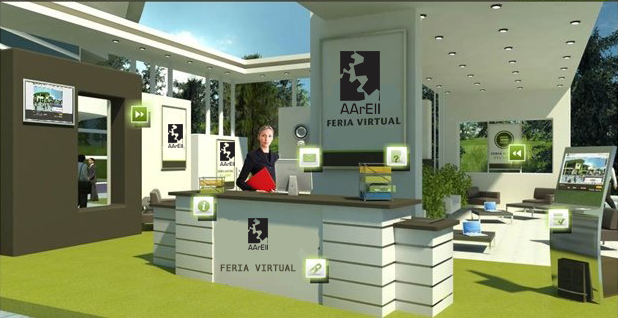
<style>
.page{position:relative;width:618px;height:318px}
.page>*{position:absolute;margin:0}
.t1{font:9px "BitstreamVeraSansMono-Roman";letter-spacing:0.025em;color:#4c4a33;font-weight:bold}
</style>
<div class="page">
<p class="t1" style="left:220px;top:264px;width:76px;height:8px">FERIA VIRTUAL</p>
</div>
